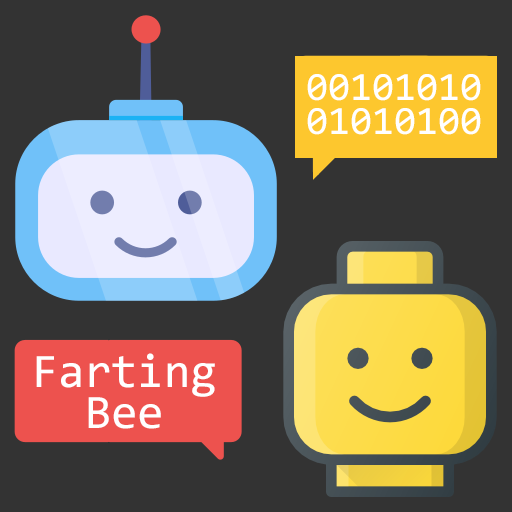
<style>
.page{position:relative;width:512px;height:512px;background:#333333}
.page>*{position:absolute;margin:0}
.t1{font:40.1px/34.2px "Consolas";color:#ffffff}
.t2{font:48px/40.8px "Consolas";color:#ffffff}
</style>
<div class="page">
<p class="t1" style="left:307px;top:74px;width:174px;height:61px;text-align:center">00101010<br>01010100</p>
<p class="t2" style="left:36px;top:353px;width:179px;height:76px;text-align:center">Farting<br>Bee</p>
</div>
